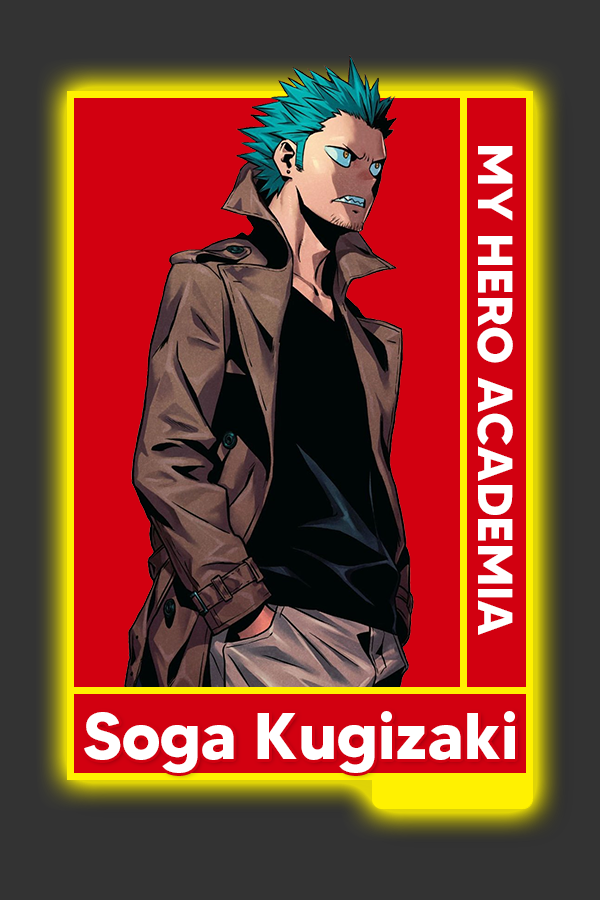
<style>
.page{position:relative;width:600px;height:900px;background:#d20010}
.page>*{position:absolute;margin:0}
.t1{font:48.8px "MADETOMMY-Bold";color:#ffffff}
.t2{font:65.2px "MADETOMMY-Bold";color:#ffffff}
</style>
<div class="page">
<p class="t1" style="left:477px;top:146px;width:36px;height:489px;rotate:90deg">MY HERO ACADEMIA</p>
<p class="t2" style="left:84px;top:711px;width:431px;height:62px">Soga Kugizaki</p>
</div>
